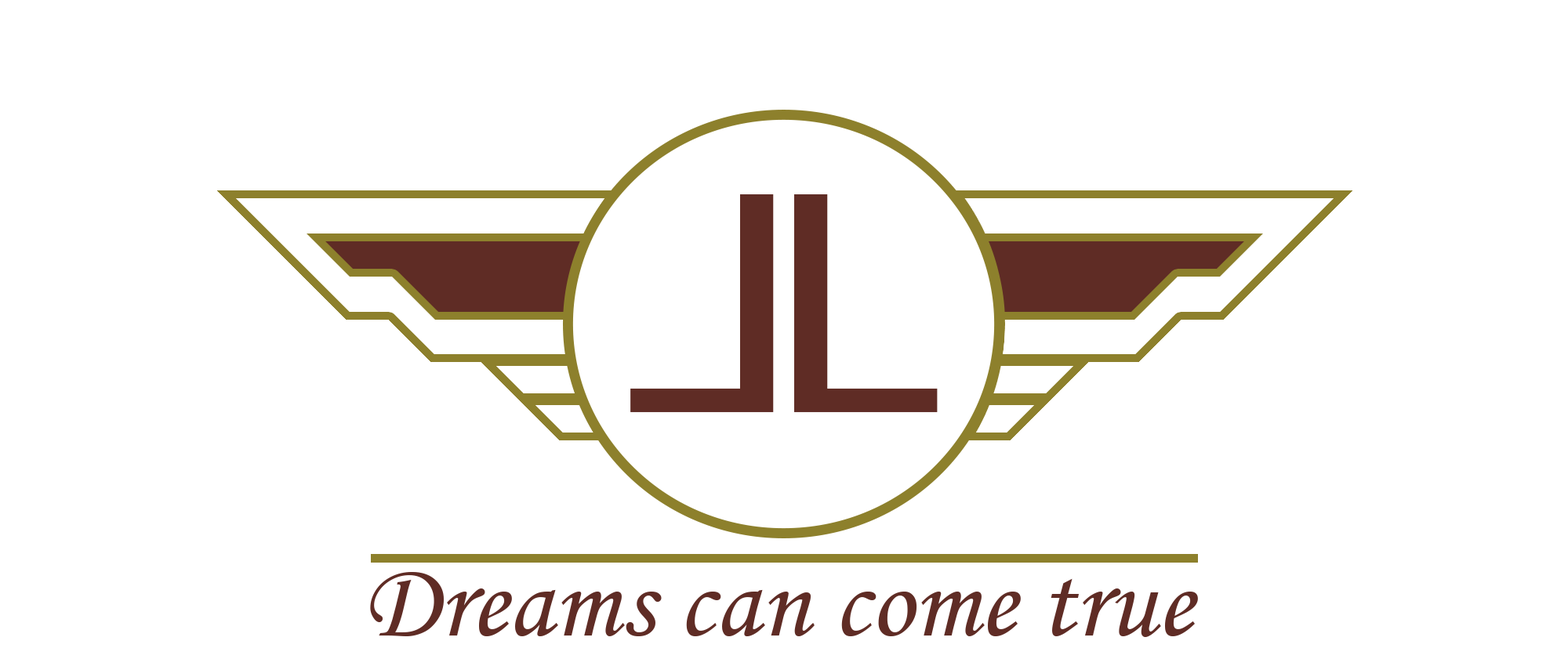
<style>
.page{position:relative;width:1568px;height:648px;background:#ffffff}
.page>*{position:absolute;margin:0}
.t1{font:323.4px "MyriadPro-Regular";color:#5f2c25;scale:1.18 1}
.t2{font:107.8px "MonotypeCorsiva";color:#5f2c25}
</style>
<div class="page">
<p class="t1" style="left:630px;top:194px;width:144px;height:218px;rotate:180deg">L</p>
<p class="t1" style="left:794px;top:194px;width:144px;height:218px">L</p>
<p class="t2" style="left:370px;top:572px;width:828px;height:65px">Dreams can come true</p>
</div>
